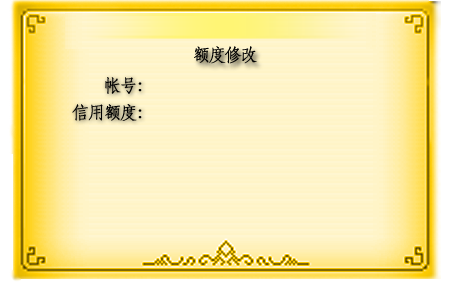
<style>
.page{position:relative;width:449px;height:285px;background:#fff4c7}
.page>*{position:absolute;margin:0}
.t1{font:18px "STFangsong";letter-spacing:-0.14em;color:#010101;font-weight:bold}
.t2{font:18px "STFangsong";letter-spacing:-0.14em;color:#000000;font-weight:bold}
</style>
<div class="page">
<p class="t1" style="left:194px;top:46px;width:63px;height:18px">额度修改</p>
<p class="t2" style="left:105px;top:77px;width:37px;height:17px">帐号：</p>
<p class="t2" style="left:72px;top:104px;width:70px;height:17px">信用额度：</p>
</div>
